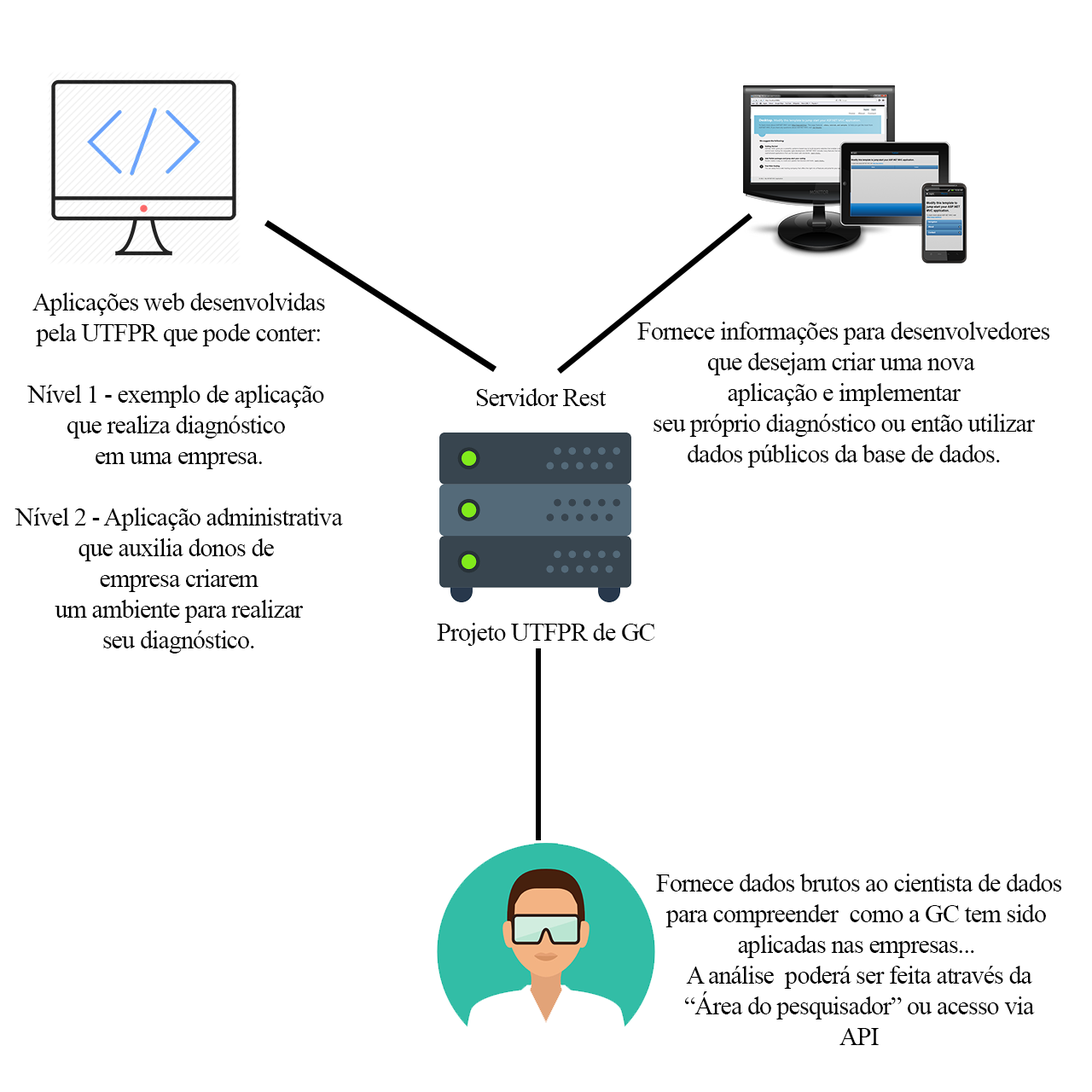
<style>
.page{position:relative;width:1092px;height:1092px;background:#ffffff}
.page>*{position:absolute;margin:0}
.t1{font:25.6px "TimesNewRomanPSMT";letter-spacing:-0.03em;color:#000000}
</style>
<div class="page">
<p class="t1" style="left:15px;top:293px;width:328px;height:360px;text-align:center">Aplicações web desenvolvidas<br>pela UTFPR que pode conter:<br><br>Nível 1 - exemplo de aplicação <br>que realiza diagnóstico <br>em uma empresa.<br><br>Nível 2 - Aplicação administrativa<br>que auxilia donos de <br>empresa criarem<br>um ambiente para realizar<br>seu diagnóstico.</p>
<p class="t1" style="left:637px;top:322px;width:413px;height:146px;text-align:center">Fornece informações para desenvolvedores<br>que desejam criar uma nova <br>aplicação e implementar<br>seu próprio diagnóstico ou então utilizar<br>dados públicos da base de dados.</p>
<p class="t1" style="left:476px;top:388px;width:131px;height:18px">Servidor Rest</p>
<p class="t1" style="left:437px;top:623px;width:218px;height:23px">Projeto UTFPR de GC</p>
<p class="t1" style="left:656px;top:874px;width:406px;height:171px;text-align:center">Fornece dados brutos ao cientista de dados<br>para compreender  como a GC tem sido <br>aplicadas nas empresas... <br>A análise  poderá ser feita através da<br>“Área do pesquisador” ou acesso via<br>API</p>
</div>
